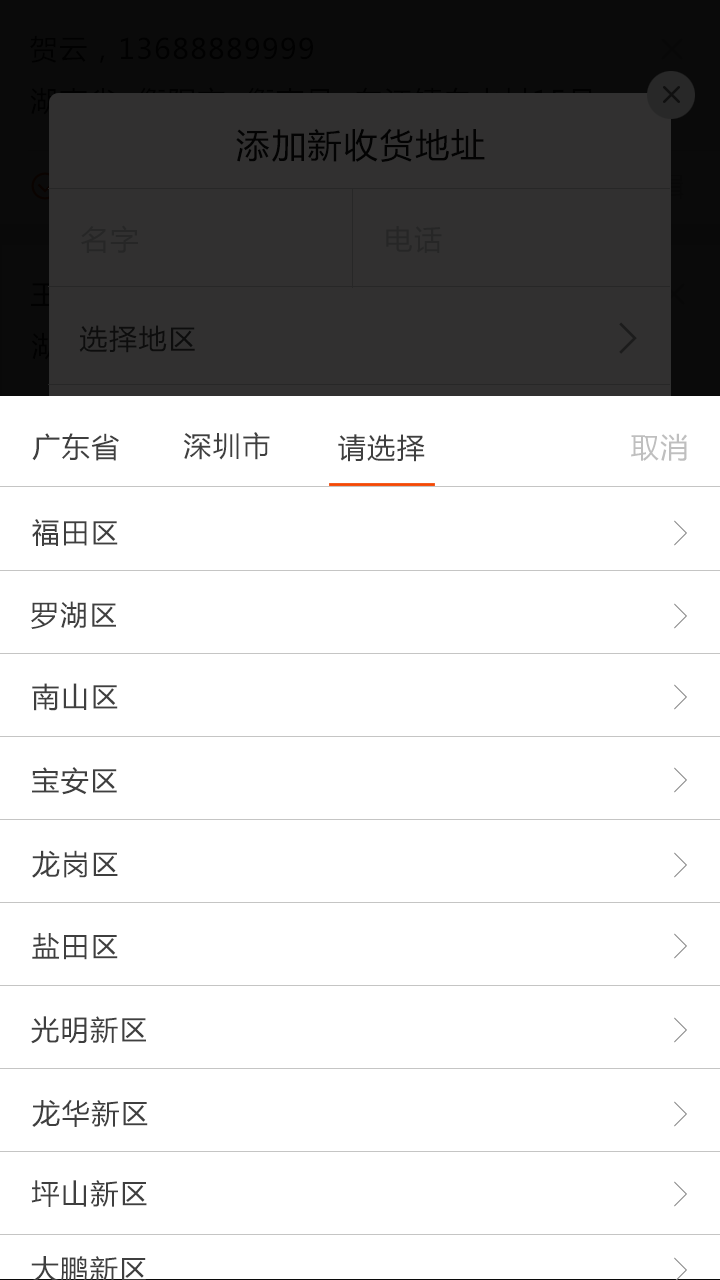
<style>
.page{position:relative;width:720px;height:1280px;background:#ffffff}
.page>*{position:absolute;margin:0}
.t1{font:28px "MicrosoftYaHei";letter-spacing:0.055em;color:#3f3f3f;text-transform:uppercase}
.t2{font:28px "MicrosoftYaHei";letter-spacing:0.055em;color:#bfbfbf;text-transform:uppercase}
</style>
<div class="page">
<p class="t1" style="left:32px;top:433px;width:87px;height:28px">广东省</p>
<p class="t1" style="left:183px;top:432px;width:87px;height:28px">深圳市</p>
<p class="t1" style="left:338px;top:434px;width:87px;height:28px">请选择</p>
<p class="t2" style="left:631px;top:433px;width:56px;height:28px">取消</p>
<p class="t1" style="left:32px;top:519px;width:86px;height:27px">福田区</p>
<p class="t1" style="left:31px;top:601px;width:85px;height:28px">罗湖区</p>
<p class="t1" style="left:32px;top:683px;width:86px;height:28px">南山区</p>
<p class="t1" style="left:32px;top:767px;width:85px;height:28px">宝安区</p>
<p class="t1" style="left:32px;top:850px;width:86px;height:28px">龙岗区</p>
<p class="t1" style="left:32px;top:933px;width:86px;height:27px">盐田区</p>
<p class="t1" style="left:31px;top:1016px;width:115px;height:28px">光明新区</p>
<p class="t1" style="left:32px;top:1099px;width:116px;height:28px">龙华新区</p>
<p class="t1" style="left:31px;top:1180px;width:116px;height:27px">坪山新区</p>
</div>
